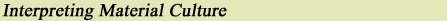
<style>
.page{position:relative;width:447px;height:21px;background:#e6e6b8}
.page>*{position:absolute;margin:0}
.t1{font:18px "TimesNewRomanPSMT";color:#010101;font-weight:bold;font-style:italic}
</style>
<div class="page">
<p class="t1" style="left:2px;top:3px;width:225px;height:18px">Interpreting Material Culture</p>
</div>
